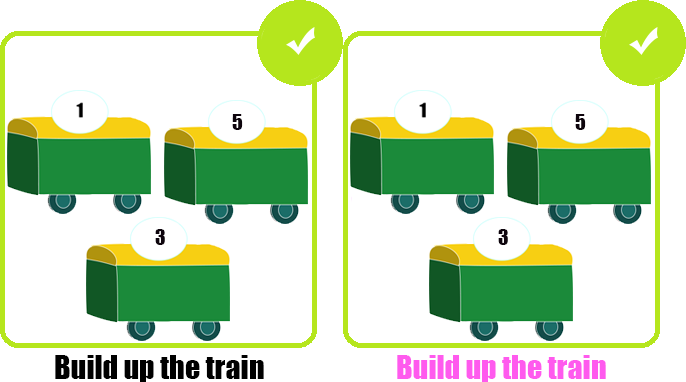
<style>
.page{position:relative;width:686px;height:382px;background:#ffffff}
.page>*{position:absolute;margin:0}
.t1{font:20px "Impact";color:#0e050d}
.t2{font:30px "Impact";color:#000000}
.t3{font:30px "Impact";color:#ff5aee}
</style>
<div class="page">
<p class="t1" style="left:232px;top:114px;width:11px;height:16px">5</p>
<p class="t1" style="left:575px;top:114px;width:11px;height:16px">5</p>
<p class="t1" style="left:155px;top:229px;width:10px;height:16px">3</p>
<p class="t1" style="left:498px;top:229px;width:10px;height:16px">3</p>
<p class="t2" style="left:55px;top:355px;width:209px;height:27px">Build up the train</p>
<p class="t3" style="left:397px;top:355px;width:209px;height:27px">Build up the train</p>
</div>
